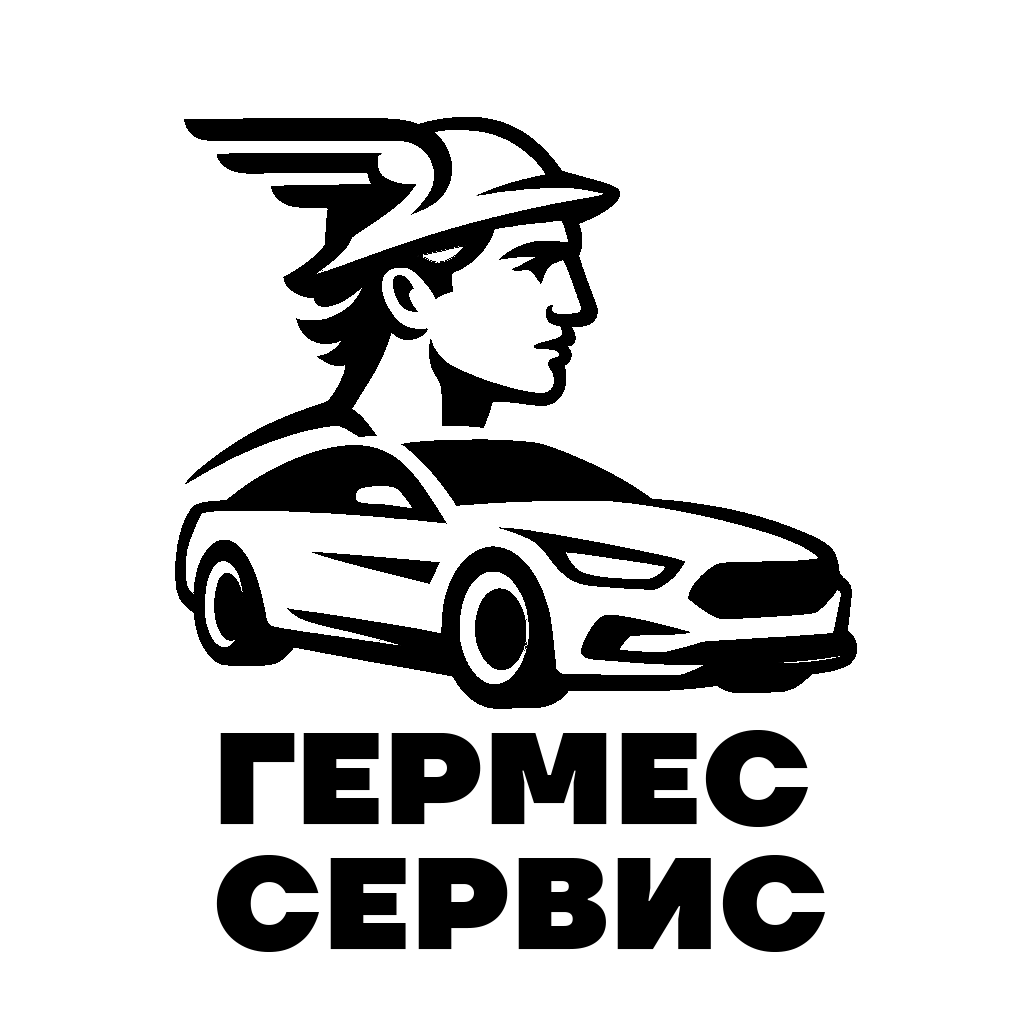
<style>
.page{position:relative;width:1024px;height:1024px;background:#ffffff}
.page>*{position:absolute;margin:0}
.t1{font:130px/125px "TTFirsNeueTrialVarRoman-Black";color:#000000;font-weight:bold;font-style:italic}
</style>
<div class="page">
<p class="t1" style="left:216px;top:730px;width:609px;height:222px">ГЕРМЕС<br>СЕРВИС</p>
</div>
